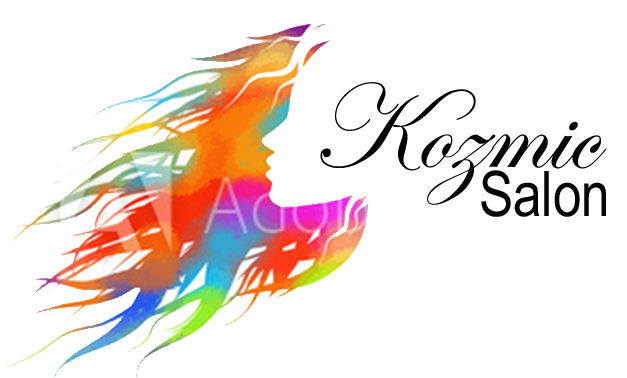
<style>
.page{position:relative;width:627px;height:378px;background:#ffffff}
.page>*{position:absolute;margin:0}
.t1{font:120px "EdwardianScriptITC";letter-spacing:-0.005em;color:#040404}
.t2{font:62.8px "ArialNarrow";letter-spacing:-0.005em;color:#040404}
</style>
<div class="page">
<p class="t1" style="left:320px;top:82px;width:287px;height:123px">Kozmic</p>
<p class="t2" style="left:481px;top:170px;width:125px;height:47px">Salon</p>
</div>
